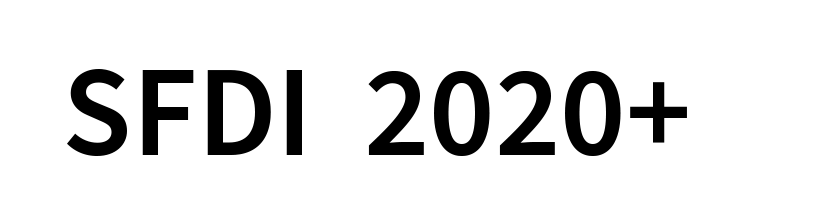
<style>
.page{position:relative;width:834px;height:223px;background:#ffffff}
.page>*{position:absolute;margin:0}
.t1{font:130px "SourceSansPro-Semibold";color:#000000}
</style>
<div class="page">
<p class="t1" style="left:67px;top:69px;width:620px;height:87px">SFDI  2020+</p>
</div>
